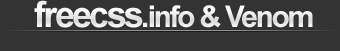
<style>
.page{position:relative;width:340px;height:51px;background:#333333}
.page>*{position:absolute;margin:0}
.t1{font:30px "Arial-BoldMT";letter-spacing:-0.075em;color:#ededed}
.t2{font:36px "Arial-BoldMT";letter-spacing:-0.075em;color:#ededed}
</style>
<div class="page">
<p class="t1" style="left:34px;top:0px;width:279px;height:28px"><span class="t2">freecss</span>.info &amp; Venom</p>
</div>
